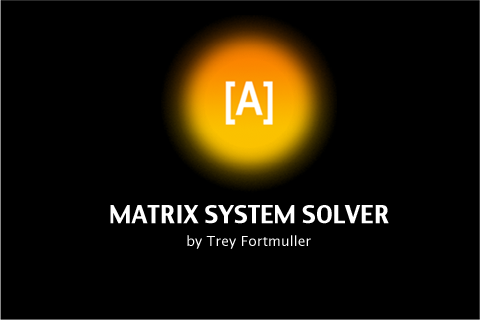
<style>
.page{position:relative;width:480px;height:320px;background:#000000}
.page>*{position:absolute;margin:0}
.t1{font:24px "CharcoalCY";color:#ffffff}
.t2{font:14px "LucidaSans";color:#ffffff}
</style>
<div class="page">
<p class="t1" style="left:110px;top:205px;width:279px;height:19px">MATRIX SYSTEM SOLVER</p>
<p class="t2" style="left:187px;top:235px;width:124px;height:14px">by Trey Fortmuller</p>
</div>
